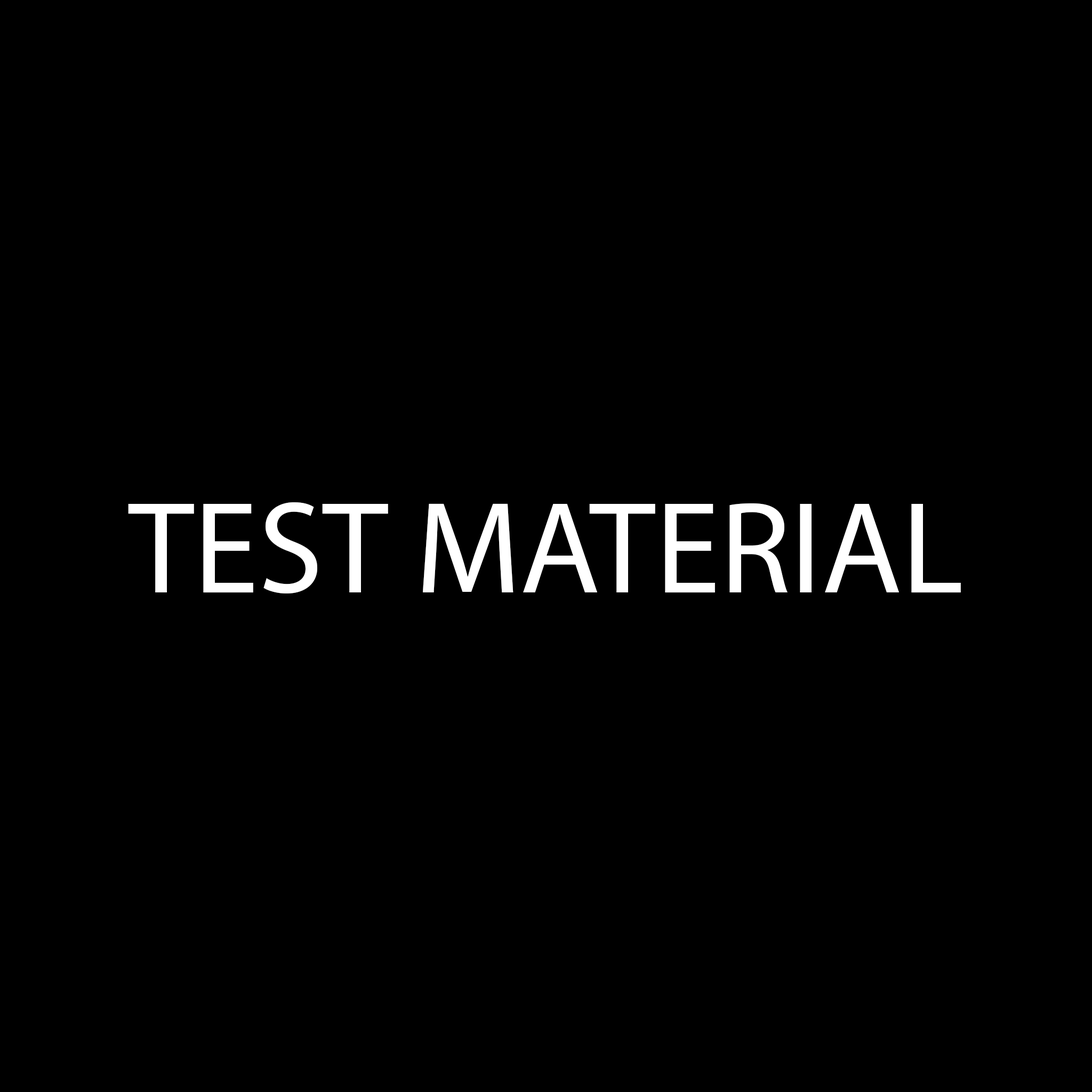
<style>
.page{position:relative;width:1092px;height:1092px;background:#000000}
.page>*{position:absolute;margin:0}
.t1{font:131.2px "MyriadPro-Regular";color:#ffffff}
</style>
<div class="page">
<p class="t1" style="left:128px;top:502px;width:833px;height:91px">TEST MATERIAL</p>
</div>
